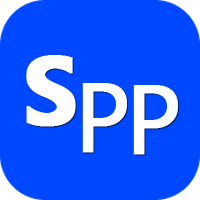
<style>
.page{position:relative;width:200px;height:200px;background:#0048ff}
.page>*{position:absolute;margin:0}
.t1{font:97.3px "MicrosoftTaiLe-Bold";color:#ffffff;font-weight:bold}
.t2{font:97.3px "MicrosoftTaiLe";color:#ffffff;font-weight:bold}
</style>
<div class="page">
<p class="t1" style="left:26px;top:55px;width:50px;height:72px">S</p>
<p class="t2" style="left:82px;top:83px;width:45px;height:70px">P</p>
<p class="t2" style="left:133px;top:85px;width:45px;height:70px">P</p>
</div>
